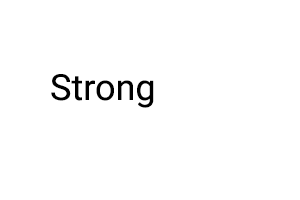
<style>
.page{position:relative;width:300px;height:200px;background:#ffffff}
.page>*{position:absolute;margin:0}
.t1{font:36px "Roboto-Regular";color:#000000}
</style>
<div class="page">
<p class="t1" style="left:51px;top:74px;width:103px;height:34px">Strong</p>
</div>
